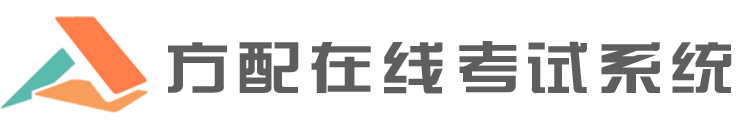
<style>
.page{position:relative;width:743px;height:130px;background:#ffffff}
.page>*{position:absolute;margin:0}
.t1{font:57px "FZZYJW--GB1-0";letter-spacing:0.1em;color:#5e5e61;scale:1.15 1}
</style>
<div class="page">
<p class="t1" style="left:168px;top:41px;width:564px;height:53px">方配在线考试系统</p>
</div>
